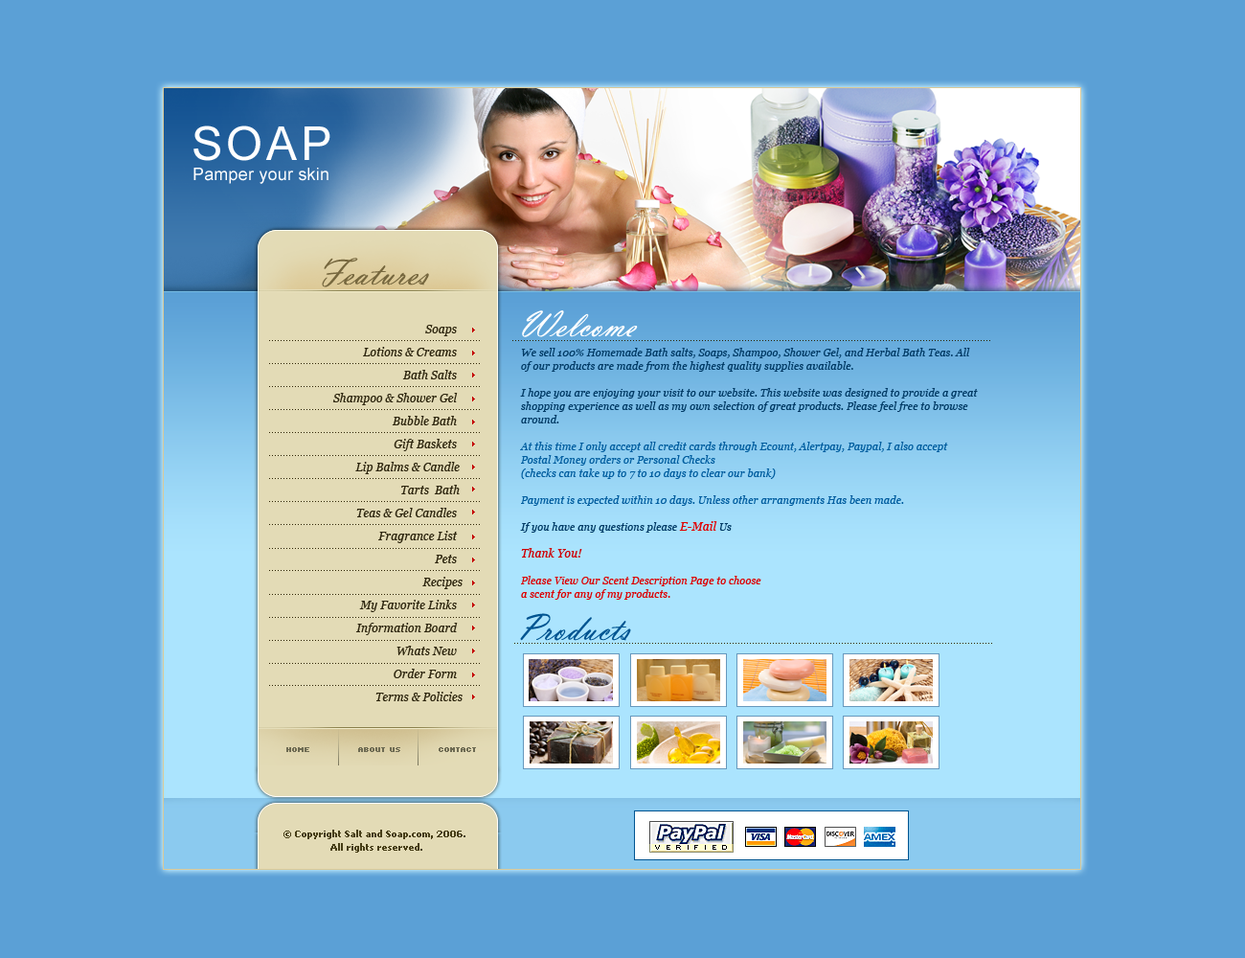
<style>
.page{position:relative;width:1245px;height:958px;background:#5ba0d6}
.page>*{position:absolute;margin:0}
.t1{font:46.8px "ArialMT";letter-spacing:0.075em;color:#ffffff;text-transform:uppercase}
.t2{font:17.3px "ArialMT";letter-spacing:0.01em;color:#ffffff}
.t3{font:38.3px "VladimirScrD";letter-spacing:0.01em;color:#76673e}
.t4{font:38.3px "VladimirScrD";letter-spacing:0.01em;color:#ffffff}
.t5{font:11.5px/23px "Georgia-Italic";letter-spacing:0.01em;color:#2e260f}
.t6{font:10.5px/13.4px "Georgia-Italic";letter-spacing:0.01em;color:#003a65}
.t7{font:10.5px/13.4px "Georgia-Italic";letter-spacing:0.01em;color:#005d9f}
.t8{font:11.5px/13.4px "Georgia-Italic";letter-spacing:0.01em;color:#e10000}
.t9{font:11.5px/13.4px "Georgia-Italic";letter-spacing:0.01em;color:#cf0002}
.t10{font:10.5px/13.4px "Georgia-Italic";letter-spacing:0.01em;color:#dd0000}
.t11{font:38.3px "VladimirScrD";letter-spacing:0.01em;color:#005491}
.t12{font:7.7px "Kroeger0555";color:#6e6b53;text-transform:uppercase;font-weight:bold}
.t13{font:9.6px/13.4px "Tahoma-Bold";color:#463d16}
</style>
<div class="page">
<p class="t1" style="left:193px;top:125px;width:137px;height:36px">Soap</p>
<p class="t2" style="left:193px;top:168px;width:136px;height:16px">Pamper your skin</p>
<p class="t3" style="left:322px;top:258px;width:107px;height:29px">Features</p>
<p class="t4" style="left:522px;top:310px;width:116px;height:27px">Welcome</p>
<p class="t5" style="left:332px;top:325px;width:131px;height:376px;text-align:right">Soaps  <br>Lotions &amp; Creams  <br>Bath Salts  <br>Shampoo &amp; Shower Gel  <br>Bubble Bath  <br>Gift Baskets  <br>Lip Balms &amp; Candle <br>Tarts  Bath <br>Teas &amp; Gel Candles  <br>Fragrance List  <br>Pets  <br>Recipes<br>My Favorite Links  <br>Information Board  <br>Whats New  <br>Order Form  <br>Terms &amp; Policies</p>
<p class="t6" style="left:520px;top:348px;width:458px;height:252px">We sell 100% Homemade Bath salts, Soaps, Shampoo, Shower Gel, and Herbal Bath Teas. All of our products are made from the highest quality supplies available. <br><br>I hope you are enjoying your visit to our website. This website was designed to provide a great shopping experience as well as my own selection of great products. Please feel free to browse around. <br><br><span class="t7">At this time I only accept all credit cards through Ecount, Alertpay, Paypal, I also accept Postal Money orders or Personal Checks<br>(checks can take up to 7 to 10 days to clear our bank) <br><br>Payment is expected within 10 days. Unless other arrangments Has been made. <br></span><br>If you have any questions please <span class="t8">E-Mail</span> Us<br><br><span class="t9">Thank You!  <br><br></span><span class="t10">Please View Our Scent Description Page to choose <br>a scent for any of my products.</span></p>
<p class="t11" style="left:520px;top:613px;width:111px;height:28px">Products</p>
<p class="t12" style="left:286px;top:747px;width:23px;height:5px">home</p>
<p class="t12" style="left:358px;top:747px;width:42px;height:5px">about us</p>
<p class="t12" style="left:439px;top:747px;width:37px;height:5px">contact</p>
<p class="t13" style="left:283px;top:829px;width:182px;height:23px;text-align:center">© Copyright Salt and Soap.com, 2006. <br>All rights reserved.</p>
</div>
